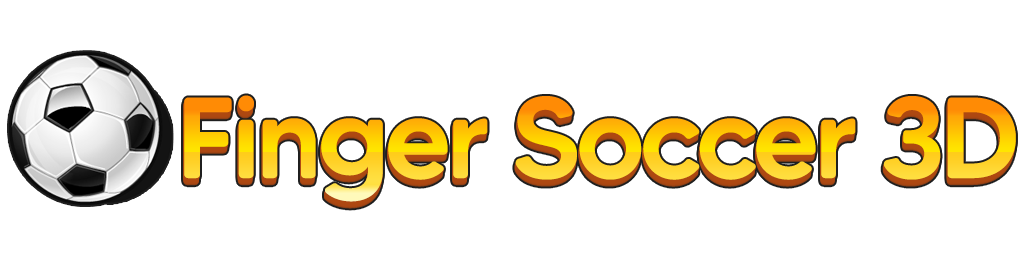
<style>
.page{position:relative;width:1024px;height:256px;background:#ffffff}
.page>*{position:absolute;margin:0}
.t1{font:115px "MADETommySoft-Medium";letter-spacing:-0.04em}
</style>
<div class="page">
<p class="t1" style="left:184px;top:95px;width:832px;height:107px">Finger Soccer 3D</p>
</div>
